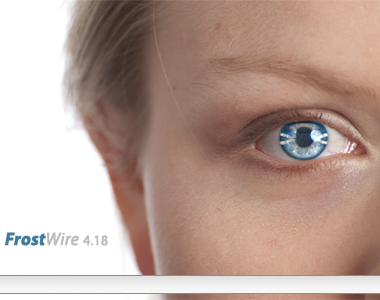
<style>
.page{position:relative;width:380px;height:300px;background:#ffffff}
.page>*{position:absolute;margin:0}
.t1{font:18px "MyriadPro-BoldIt";color:#417b9d;font-weight:bold;scale:0.97 1}
.t2{font:18px "MyriadPro-It";color:#bbbbbb;font-weight:bold;scale:0.97 1}
.t3{font:14px "MyriadPro-Regular";color:#bbbbbb;font-weight:bold;scale:0.97 1}
</style>
<div class="page">
<p class="t1" style="left:5px;top:232px;width:103px;height:14px">Frost<span class="t2">Wire </span><span class="t3">4.18</span></p>
</div>
